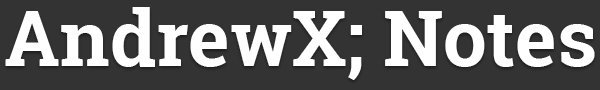
<style>
.page{position:relative;width:600px;height:90px;background:#333333}
.page>*{position:absolute;margin:0}
.t1{font:77.7px "RobotoSlab-Bold";color:#ffffff}
</style>
<div class="page">
<p class="t1" style="left:5px;top:7px;width:590px;height:73px">AndrewX; Notes</p>
</div>
